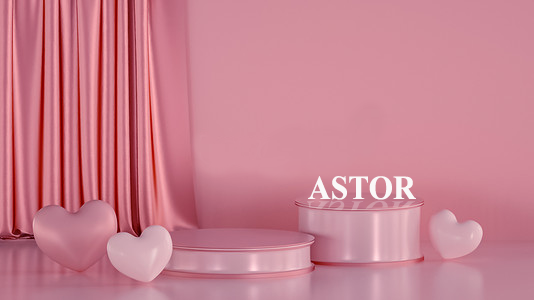
<style>
.page{position:relative;width:534px;height:300px}
.page>*{position:absolute;margin:0}
.t1{font:33.7px "TimesNewRomanPS-BoldMT";color:#faf8f8;scale:0.93 1}
</style>
<div class="page">
<p class="t1" style="left:308px;top:176px;width:108px;height:24px">ASTOR</p>
</div>
